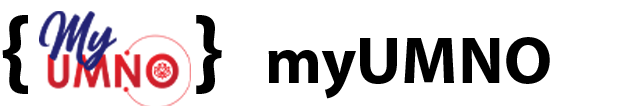
<style>
.page{position:relative;width:630px;height:106px;background:#ffffff}
.page>*{position:absolute;margin:0}
.t1{font:100px "MyriadPro-Bold";color:#000000}
.t2{font:66.7px "MyriadPro-Bold";color:#000000}
</style>
<div class="page">
<p class="t1" style="left:2px;top:15px;width:548px;height:84px">{        }<span class="t2">   myUMNO</span></p>
</div>
